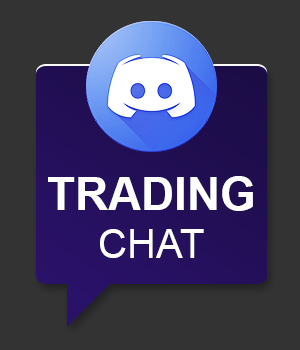
<style>
.page{position:relative;width:300px;height:350px;background:#333333}
.page>*{position:absolute;margin:0}
.t1{font:45.8px "Arial-BoldMT";color:#ffffff}
.t2{font:40px "ArialMT";color:#ffffff}
</style>
<div class="page">
<p class="t1" style="left:48px;top:176px;width:205px;height:82px;text-align:center">TRADING <br><span class="t2">CHAT</span></p>
</div>
